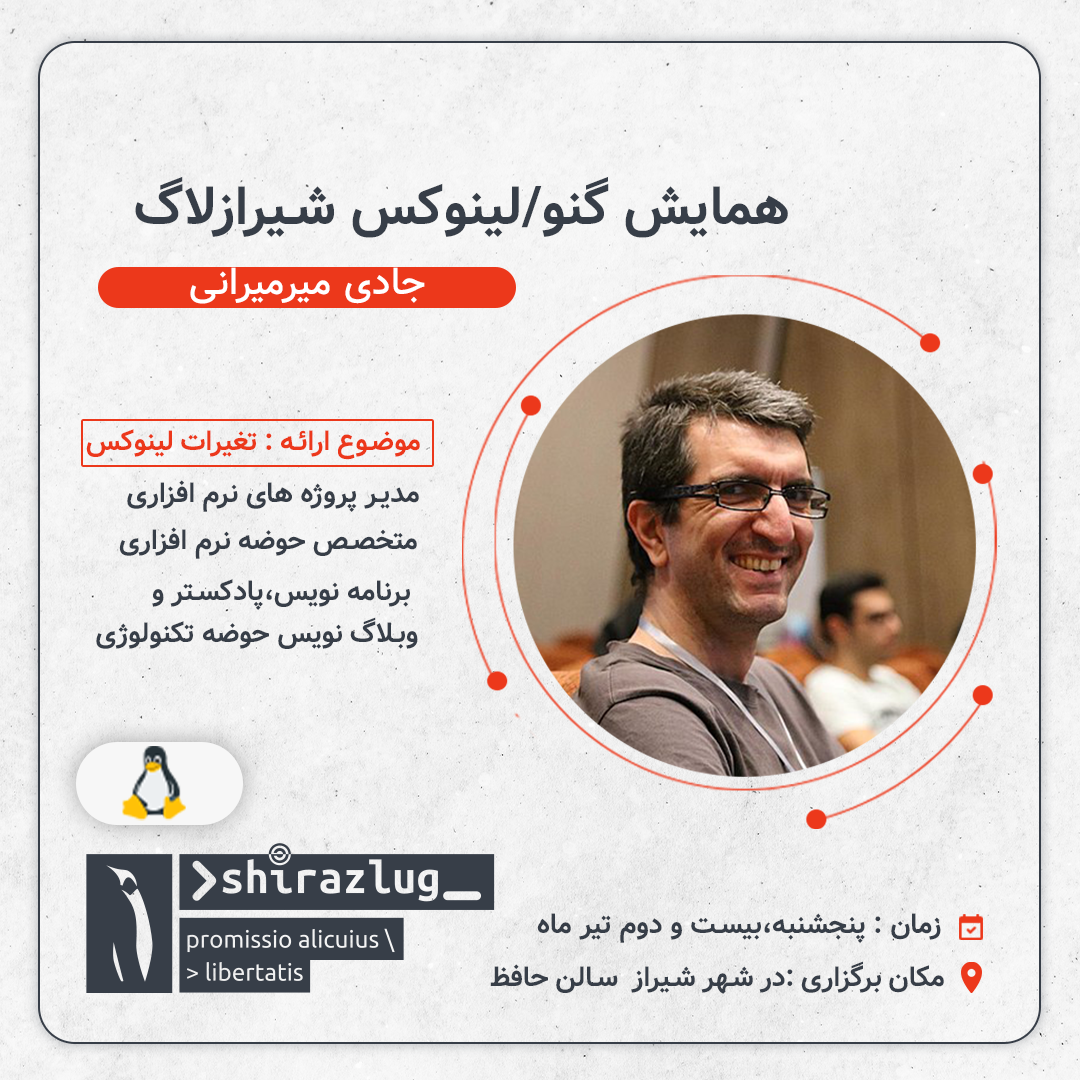
<style>
.page{position:relative;width:1080px;height:1080px}
.page>*{position:absolute;margin:0}
.t1{font:53.5px "Vazir-Bold";letter-spacing:0.01em;color:#373e48}
.t2{font:37.5px "Vazir-Medium";letter-spacing:0.01em;color:#ffffff}
.t3{font:27.6px "Vazir-Bold";letter-spacing:0.01em;color:#ec381b}
.t4{font:27.6px "Vazir-Bold";letter-spacing:0.01em;color:#373e48}
.t5{font:27.6px/41.4px "Vazir-Bold";letter-spacing:0.01em;color:#373e48}
</style>
<div class="page">
<p class="t1" style="left:135px;top:176px;width:653px;height:62px">همایش گنو/لینوکس شیرازلاگ</p>
<p class="t2" style="left:190px;top:267px;width:235px;height:37px">جادی میرمیرانی</p>
<p class="t3" style="left:86px;top:429px;width:334px;height:31px">موضوع ارائه : تغیرات لینوکس</p>
<p class="t4" style="left:127px;top:480px;width:292px;height:32px">مدیر پروژه های نرم افزاری</p>
<p class="t4" style="left:119px;top:527px;width:298px;height:32px">متخصص حوضه نرم افزاری</p>
<p class="t5" style="left:96px;top:579px;width:322px;height:70px;text-align:right">برنامه نویس،پادکستر و <br>وبلاگ نویس حوضه تکنولوژی</p>
<p class="t4" style="left:537px;top:913px;width:404px;height:30px">زمان : پنجشنبه،بیست و دوم تیر ماه</p>
<p class="t4" style="left:490px;top:961px;width:454px;height:33px">مکان برگزاری :در شهر شیراز  سالن حافظ</p>
</div>
